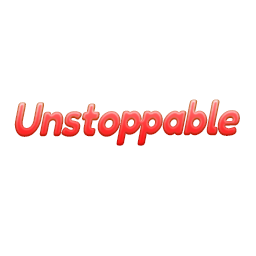
<style>
.page{position:relative;width:256px;height:256px;background:#ffffff}
.page>*{position:absolute;margin:0}
.t1{font:49.6px "Fredoka-Bold";letter-spacing:-0.03em;scale:0.84 1}
</style>
<div class="page">
<p class="t1" style="left:14px;top:99px;width:226px;height:47px">Unstoppable</p>
</div>
